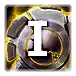
<style>
.page{position:relative;width:76px;height:76px;background:#ffffff}
.page>*{position:absolute;margin:0}
.t1{font:48px "Meiryo-Bold";color:#ffffff}
</style>
<div class="page">
<p class="t1" style="left:28px;top:21px;width:19px;height:35px">Ⅰ</p>
</div>
